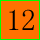
<style>
.page{position:relative;width:40px;height:40px;background:#ff7200}
.page>*{position:absolute;margin:0}
.t1{font:30px "SimSun";color:#000000}
</style>
<div class="page">
<p class="t1" style="left:9px;top:9px;width:25px;height:21px">12</p>
</div>
